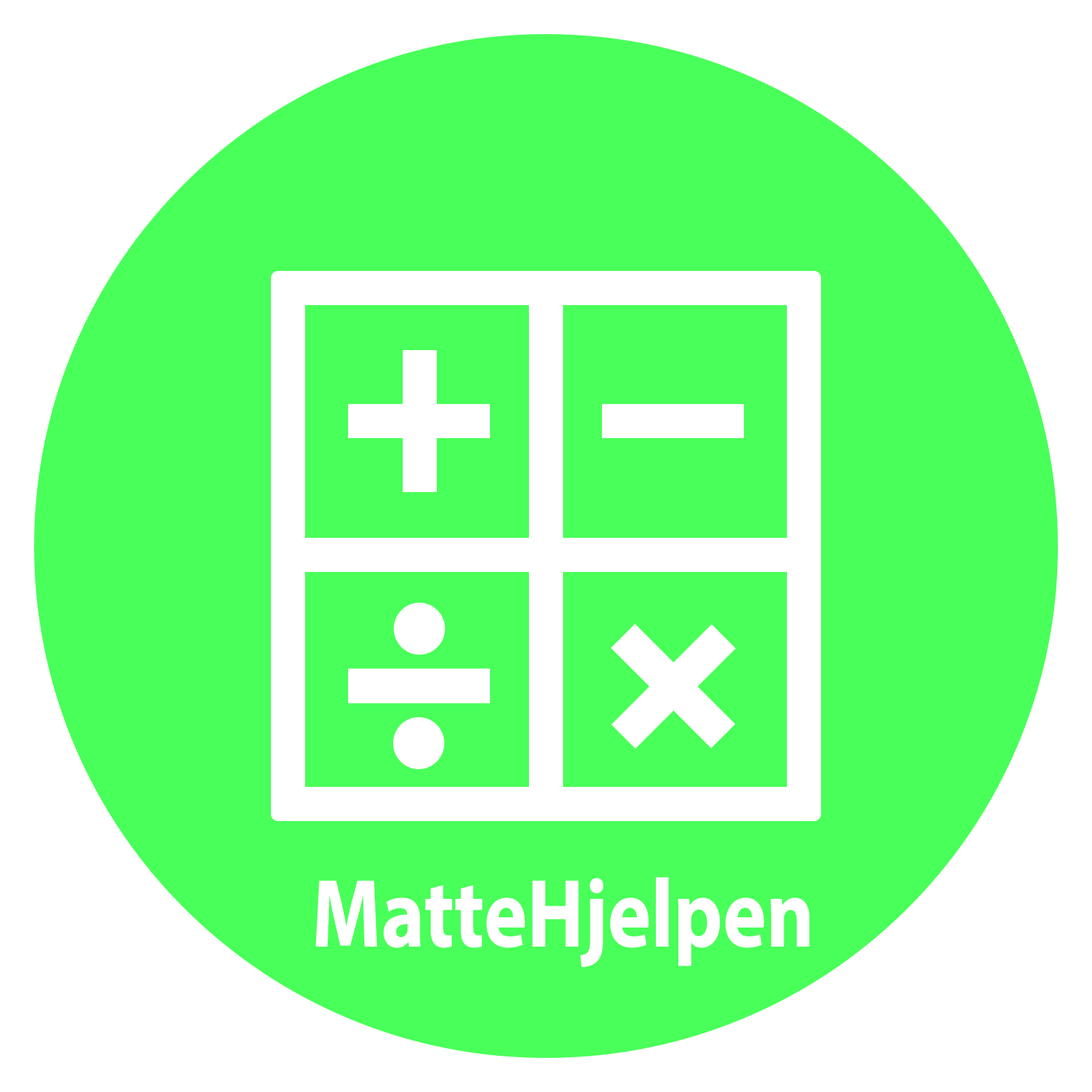
<style>
.page{position:relative;width:1092px;height:1092px;background:#49ff59}
.page>*{position:absolute;margin:0}
.t1{font:97.4px "MyriadPro-Bold";color:#ffffff;scale:0.84 1}
</style>
<div class="page">
<p class="t1" style="left:315px;top:877px;width:494px;height:90px">MatteHjelpen</p>
</div>
